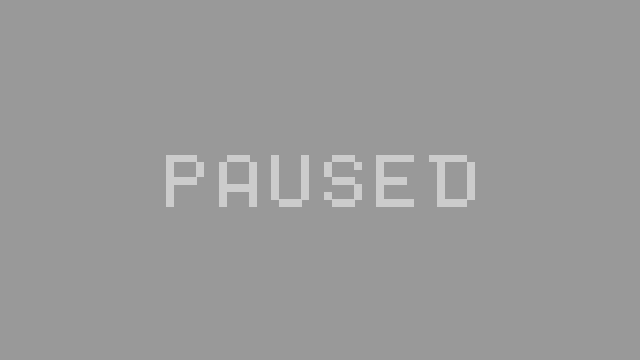
<style>
.page{position:relative;width:640px;height:360px;background:#999999}
.page>*{position:absolute;margin:0}
.t1{font:60px "Dogica_Pixel";color:#cccccc}
</style>
<div class="page">
<p class="t1" style="left:166px;top:155px;width:309px;height:52px">PAUSED</p>
</div>
